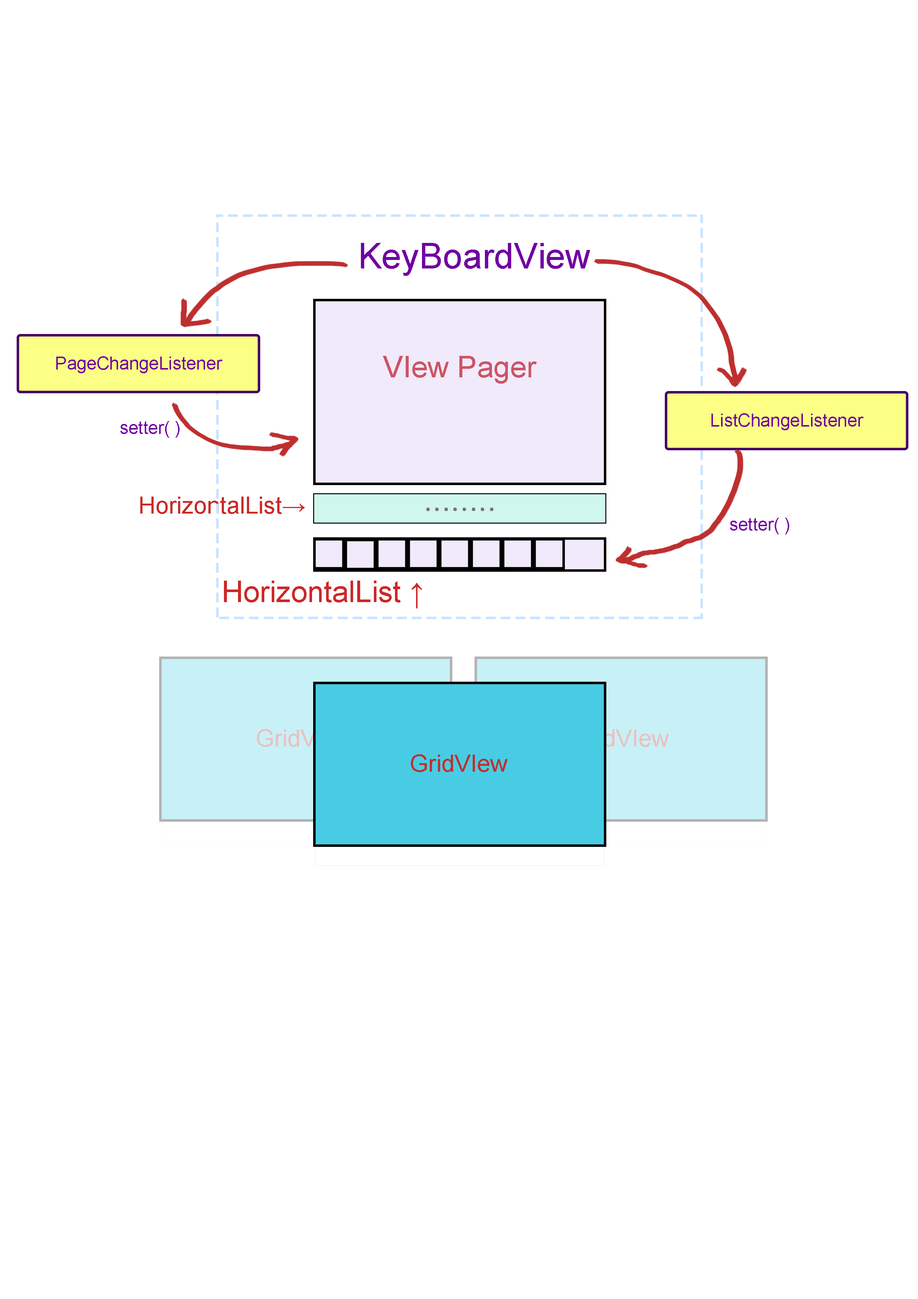
<style>
.page{position:relative;width:918px;height:1299px;background:#ffffff}
.page>*{position:absolute;margin:0}
.t1{font:35.5px "ArialMT";color:#7000a2}
.t2{font:17.8px "ArialMT";color:#7000a2}
.t3{font:29.6px "ArialMT";color:#cc5465}
.t4{font:23.7px "ArialMT";color:#cc2828}
.t5{font:17.3px "HYj2gj";color:#747474;font-weight:bold}
.t6{font:29.6px "ArialMT";color:#cc2828}
.t7{font:23.7px "ArialMT"}
.t8{font:23.7px "ArialMT";color:#be2f2f}
</style>
<div class="page">
<p class="t1" style="left:361px;top:243px;width:229px;height:33px">KeyBoardView</p>
<p class="t2" style="left:56px;top:356px;width:167px;height:17px">PageChangeListener</p>
<p class="t3" style="left:383px;top:356px;width:154px;height:28px">VIew Pager</p>
<p class="t2" style="left:712px;top:413px;width:152px;height:17px">ListChangeListener</p>
<p class="t2" style="left:120px;top:421px;width:60px;height:17px">setter( )</p>
<p class="t4" style="left:140px;top:496px;width:165px;height:18px">HorizontalList→</p>
<p class="t5" style="left:426px;top:508px;width:68px;height:3px">........</p>
<p class="t2" style="left:730px;top:518px;width:59px;height:16px">setter( )</p>
<p class="t6" style="left:224px;top:581px;width:198px;height:27px">HorizontalList ↑</p>
<p class="t7" style="left:257px;top:729px;width:97px;height:18px">GridVIew</p>
<p class="t7" style="left:572px;top:729px;width:97px;height:18px">GridVIew</p>
<p class="t8" style="left:411px;top:754px;width:97px;height:18px">GridVIew</p>
</div>
